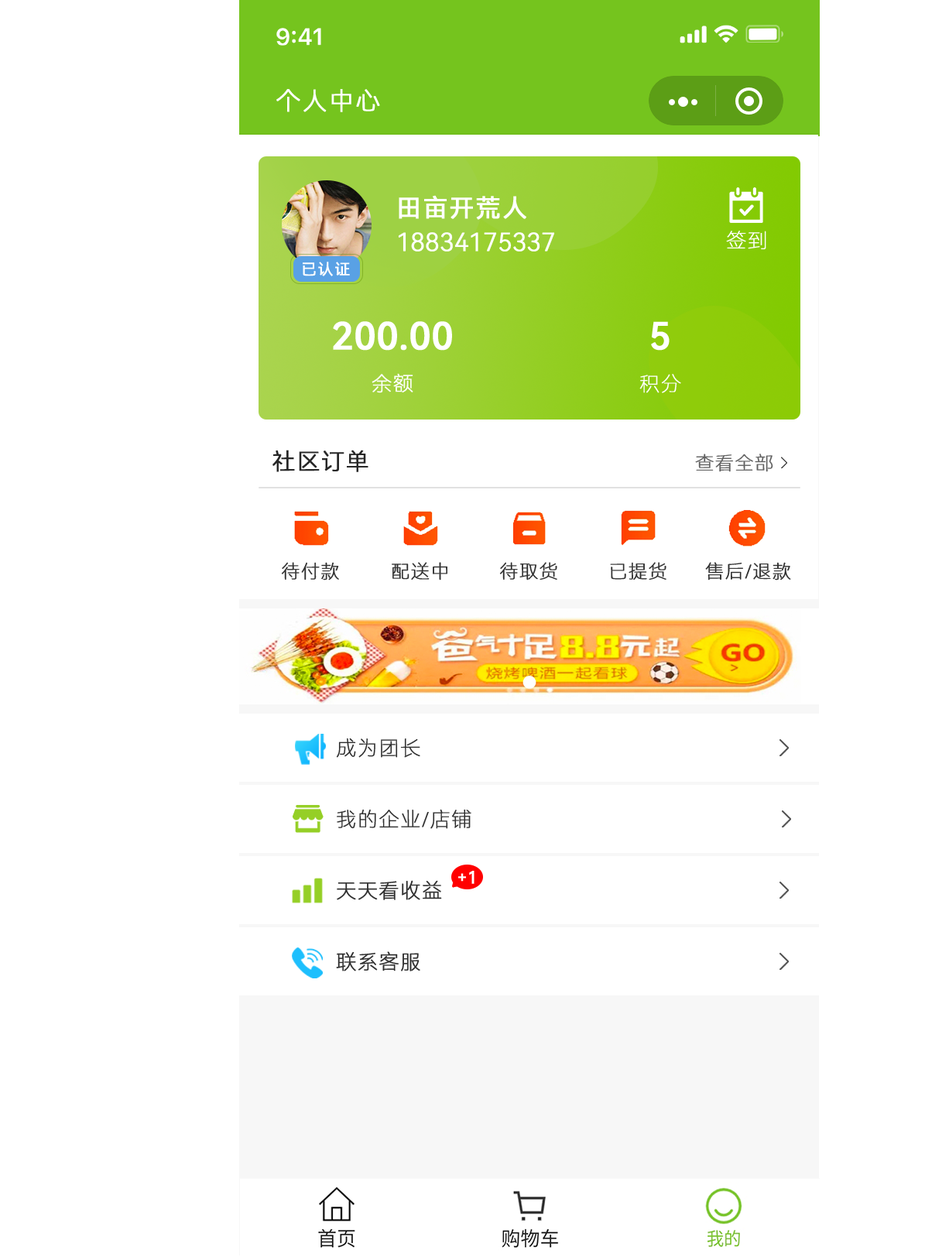
<style>
.page{position:relative;width:949px;height:1257px;background:#ffffff}
.page>*{position:absolute;margin:0}
.t1{font:24.8px "HarmonyOS_Sans_SC_Light";letter-spacing:0.04em;color:#ffffff;text-transform:uppercase;font-weight:bold}
.t2{font:24.7px "HarmonyOS_Sans_SC";letter-spacing:0.04em;color:#ffffff;text-transform:uppercase;font-weight:bold}
.t3{font:24.7px "HarmonyOS_Sans_Light";color:#ffffff;text-transform:uppercase;font-weight:bold}
.t4{font:20.1px "HarmonyOS_Sans_SC_Thin";letter-spacing:0.04em;color:#ffffff;text-transform:uppercase;font-weight:bold}
.t5{font:15.5px "HarmonyOS_Sans_SC";letter-spacing:0.04em;color:#ffffff;text-transform:uppercase;font-weight:bold}
.t6{font:37.1px "HarmonyOS_Sans_Medium";color:#ffffff;text-transform:uppercase;font-weight:bold}
.t7{font:23.2px "HarmonyOS_Sans_SC_Light";letter-spacing:0.025em;color:#272727;text-transform:uppercase;font-weight:bold}
.t8{font:18.6px "HarmonyOS_Sans_SC_Thin";letter-spacing:0.025em;color:#5f5f5f;text-transform:uppercase;font-weight:bold}
.t9{font:18.6px "HarmonyOS_Sans_SC_Thin";letter-spacing:0.025em;color:#2d2d2d;text-transform:uppercase;font-weight:bold}
.t10{font:20.1px "HarmonyOS_Sans_SC_Thin";letter-spacing:0.025em;color:#2d2d2d;text-transform:uppercase;font-weight:bold}
.t11{font:15.5px "OPPOSans-B";letter-spacing:0.025em;color:#ffffff;text-transform:uppercase;font-weight:bold}
</style>
<div class="page">
<p class="t1" style="left:276px;top:89px;width:104px;height:23px">个人中心</p>
<p class="t2" style="left:399px;top:195px;width:127px;height:25px">田亩开荒人</p>
<p class="t3" style="left:398px;top:232px;width:157px;height:20px">18834175337</p>
<p class="t4" style="left:726px;top:231px;width:40px;height:19px">签到</p>
<p class="t5" style="left:303px;top:262px;width:47px;height:14px">已认证</p>
<p class="t6" style="left:333px;top:321px;width:119px;height:30px">200.00</p>
<p class="t6" style="left:651px;top:321px;width:18px;height:30px">5</p>
<p class="t4" style="left:371px;top:373px;width:42px;height:20px">余额</p>
<p class="t4" style="left:639px;top:374px;width:42px;height:19px">积分</p>
<p class="t7" style="left:272px;top:450px;width:96px;height:22px">社区订单</p>
<p class="t8" style="left:695px;top:453px;width:78px;height:19px">查看全部</p>
<p class="t9" style="left:281px;top:562px;width:58px;height:18px">待付款</p>
<p class="t9" style="left:392px;top:562px;width:55px;height:18px">配送中</p>
<p class="t9" style="left:499px;top:562px;width:58px;height:18px">待取货</p>
<p class="t9" style="left:610px;top:562px;width:56px;height:18px">已提货</p>
<p class="t9" style="left:705px;top:562px;width:86px;height:18px">售后/退款</p>
<p class="t10" style="left:336px;top:738px;width:84px;height:20px">成为团长</p>
<p class="t10" style="left:337px;top:809px;width:134px;height:20px">我的企业/店铺</p>
<p class="t10" style="left:337px;top:880px;width:105px;height:20px">天天看收益</p>
<p class="t11" style="left:458px;top:871px;width:16px;height:13px">+1</p>
<p class="t10" style="left:336px;top:951px;width:84px;height:20px">联系客服</p>
</div>
